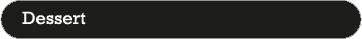
<style>
.page{position:relative;width:362px;height:39px;background:#1d1d1b}
.page>*{position:absolute;margin:0}
.t1{font:18px "Rockwell";color:#ffffff}
</style>
<div class="page">
<p class="t1" style="left:22px;top:11px;width:64px;height:14px">Dessert</p>
</div>
